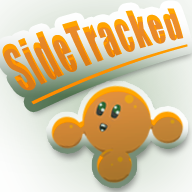
<style>
.page{position:relative;width:192px;height:192px}
.page>*{position:absolute;margin:0}
.t1{font:42.5px "Impact";letter-spacing:0.05em;color:#ee8b21;text-decoration:underline;scale:0.5 1}
</style>
<div class="page">
<p class="t1" style="left:2px;top:8px;width:186px;height:97px;rotate:-24deg">SideTracked</p>
</div>
